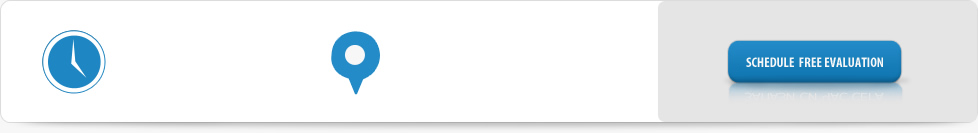
<style>
.page{position:relative;width:978px;height:133px;background:#ffffff}
.page>*{position:absolute;margin:0}
.t1{font:14px "MyriadPro-BoldCond";color:#f7f7f7;text-transform:uppercase}
</style>
<div class="page">
<p class="t1" style="left:746px;top:57px;width:137px;height:10px">Schedule  Free EVALUATION</p>
</div>
